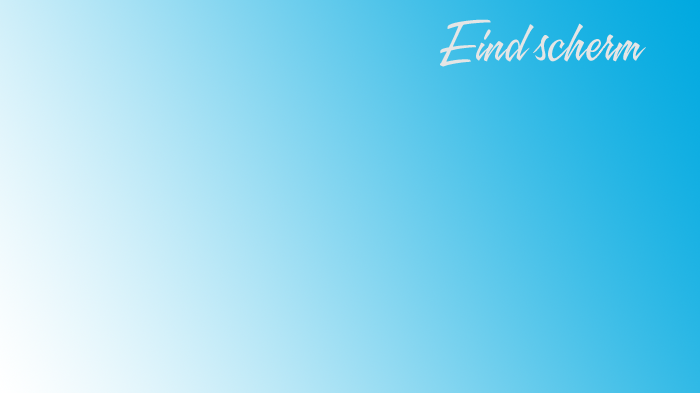
<style>
.page{position:relative;width:700px;height:393px}
.page>*{position:absolute;margin:0}
.t1{font:53px "A&S-Speedway";color:#e5e5e5}
</style>
<div class="page">
<p class="t1" style="left:440px;top:19px;width:206px;height:48px">Eind scherm</p>
</div>
